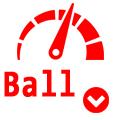
<style>
.page{position:relative;width:120px;height:120px;background:#ffffff}
.page>*{position:absolute;margin:0}
.t1{font:38px "Consolas-Bold";letter-spacing:0.05em;color:#ff0000;font-weight:bold;scale:0.8 1}
</style>
<div class="page">
<p class="t1" style="left:4px;top:69px;width:71px;height:28px">Ball</p>
</div>
